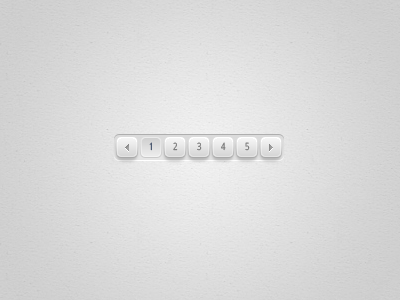
<style>
.page{position:relative;width:400px;height:300px}
.page>*{position:absolute;margin:0}
.t1{font:10px "OpenSans";letter-spacing:-0.02em;color:#425069;scale:0.77 1}
.t2{font:10px "OpenSans";letter-spacing:-0.02em;color:#767676;scale:0.77 1}
</style>
<div class="page">
<p class="t1" style="left:149px;top:142px;width:3px;height:9px">1</p>
<p class="t2" style="left:173px;top:142px;width:5px;height:9px">2</p>
<p class="t2" style="left:197px;top:142px;width:5px;height:9px">3</p>
<p class="t2" style="left:221px;top:142px;width:5px;height:9px">4</p>
<p class="t2" style="left:245px;top:142px;width:5px;height:9px">5</p>
</div>
